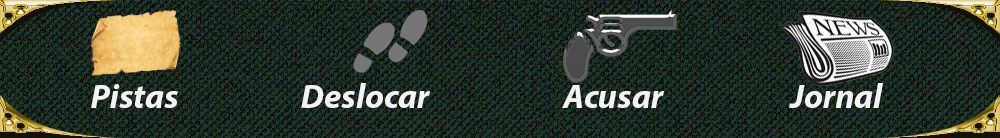
<style>
.page{position:relative;width:1000px;height:138px;background:#22382d}
.page>*{position:absolute;margin:0}
.t1{font:33.9px "MyriadPro-BoldIt";color:#f4f4f4}
</style>
<div class="page">
<p class="t1" style="left:91px;top:84px;width:87px;height:24px">Pistas</p>
<p class="t1" style="left:301px;top:83px;width:129px;height:25px">Deslocar</p>
<p class="t1" style="left:562px;top:85px;width:102px;height:23px">Acusar</p>
<p class="t1" style="left:789px;top:83px;width:94px;height:25px">Jornal</p>
</div>
